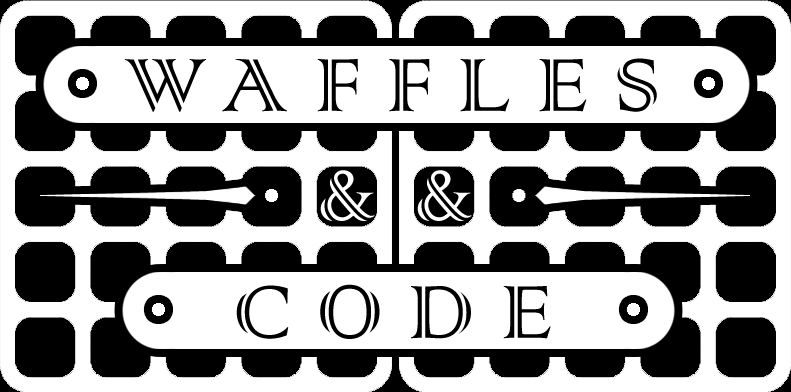
<style>
.page{position:relative;width:791px;height:392px;background:#ffffff}
.page>*{position:absolute;margin:0}
.t1{font:99.6px "ColonnaMT";letter-spacing:0.26em;color:#000000}
.t2{font:95px "ColonnaMT";letter-spacing:0.72em;color:#ffffff;scale:0.91 1}
</style>
<div class="page">
<p class="t1" style="left:124px;top:58px;width:533px;height:54px">WAFFLES</p>
<p class="t2" style="left:320px;top:170px;width:55px;height:51px">&amp;</p>
<p class="t2" style="left:417px;top:170px;width:55px;height:51px">&amp;</p>
<p class="t1" style="left:236px;top:284px;width:315px;height:55px">CODE</p>
</div>
